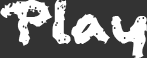
<style>
.page{position:relative;width:147px;height:58px;background:#333333}
.page>*{position:absolute;margin:0}
.t1{font:55px "squeakychalksound";color:#ffffff}
</style>
<div class="page">
<p class="t1" style="left:0px;top:0px;width:147px;height:58px">Play</p>
</div>
